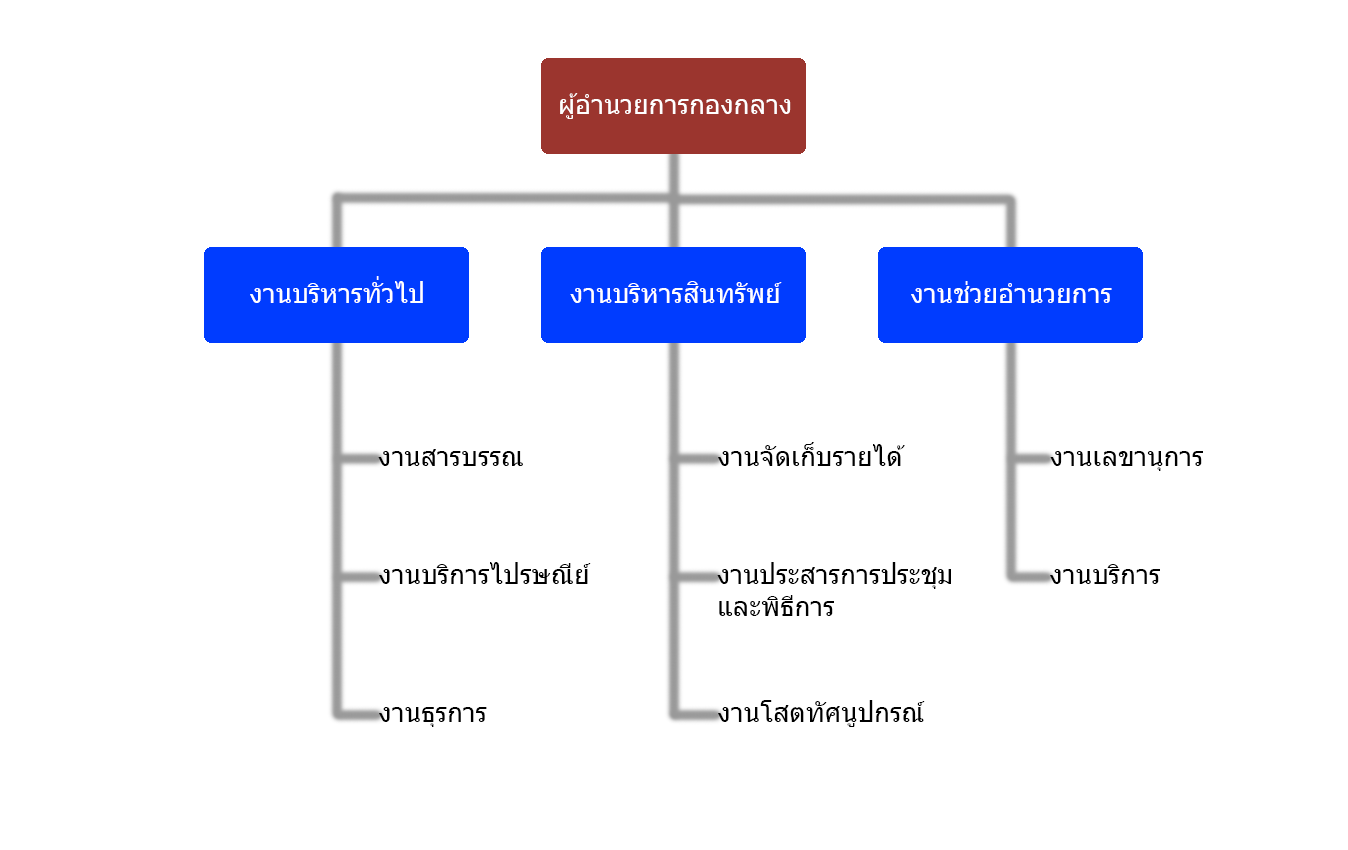
<style>
.page{position:relative;width:1348px;height:850px;background:#ffffff}
.page>*{position:absolute;margin:0}
.t1{font:26.7px "Tahoma";color:#ffffff}
.t2{font:26.7px "Tahoma";color:#000000}
</style>
<div class="page">
<p class="t1" style="left:560px;top:93px;width:231px;height:26px">ผู้อำนวยการกองกลาง</p>
<p class="t1" style="left:250px;top:276px;width:173px;height:27px">งานบริหารทั่วไป</p>
<p class="t1" style="left:570px;top:281px;width:212px;height:22px">งานบริหารสินทรัพย์</p>
<p class="t1" style="left:911px;top:281px;width:201px;height:22px">งานช่วยอำนวยการ</p>
<p class="t2" style="left:378px;top:449px;width:145px;height:17px">งานสารบรรณ</p>
<p class="t2" style="left:718px;top:442px;width:187px;height:24px">งานจัดเก็บรายได้</p>
<p class="t2" style="left:1050px;top:451px;width:153px;height:20px">งานเลขานุการ</p>
<p class="t2" style="left:379px;top:562px;width:212px;height:22px">งานบริการไปรษณีย์</p>
<p class="t2" style="left:717px;top:562px;width:234px;height:54px;text-align:right">งานประสารการประชุม<br>และพิธีการ</p>
<p class="t2" style="left:1050px;top:564px;width:110px;height:20px">งานบริการ</p>
<p class="t2" style="left:718px;top:700px;width:207px;height:27px">งานโสตทัศนูปกรณ์</p>
<p class="t2" style="left:379px;top:707px;width:108px;height:20px">งานธุรการ</p>
</div>
